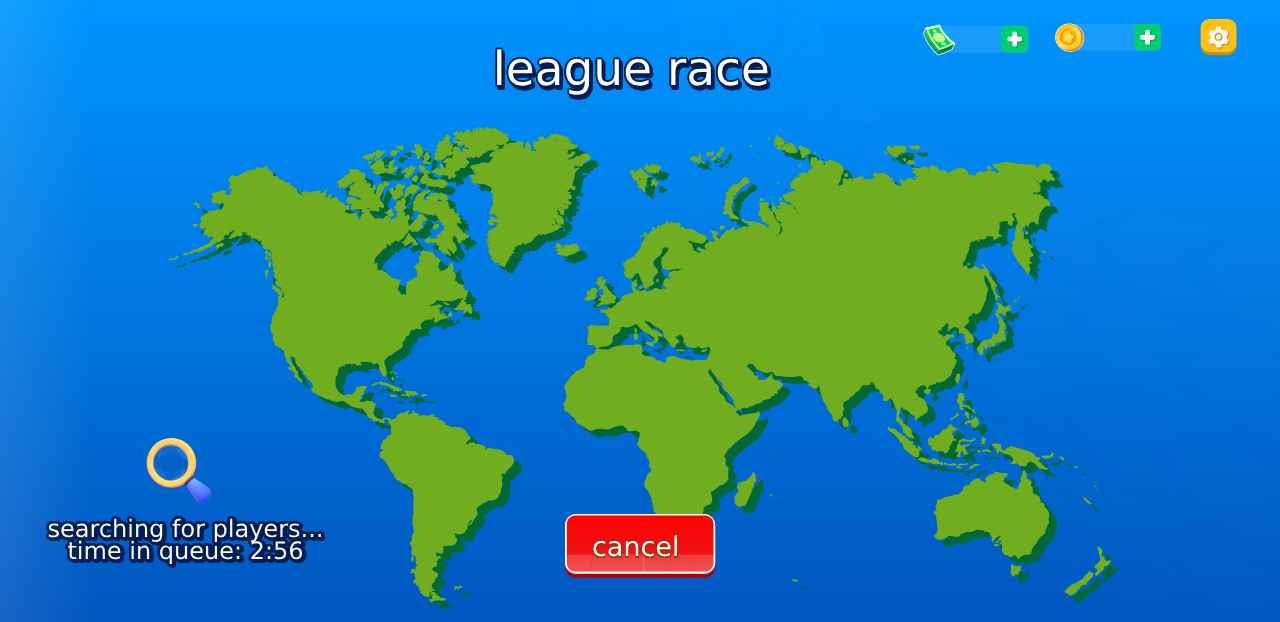
<style>
.page{position:relative;width:1280px;height:622px}
.page>*{position:absolute;margin:0}
.t1{font:47px "Junegull";color:#ffffff}
.t2{font:24px/22px "Junegull";color:#ffffff}
.t3{font:27px "Junegull"}
.t4{font:27px "Junegull";color:#ffffff}
</style>
<div class="page">
<p class="t1" style="left:497px;top:49px;width:271px;height:46px">league race</p>
<p class="t2" style="left:48px;top:518px;width:273px;height:46px;text-align:center">searching for players...<br>time in queue: 2:56</p>
<p class="t3" style="left:593px;top:536px;width:84px;height:22px">cancel</p>
<p class="t4" style="left:593px;top:535px;width:84px;height:22px">cancel</p>
</div>
